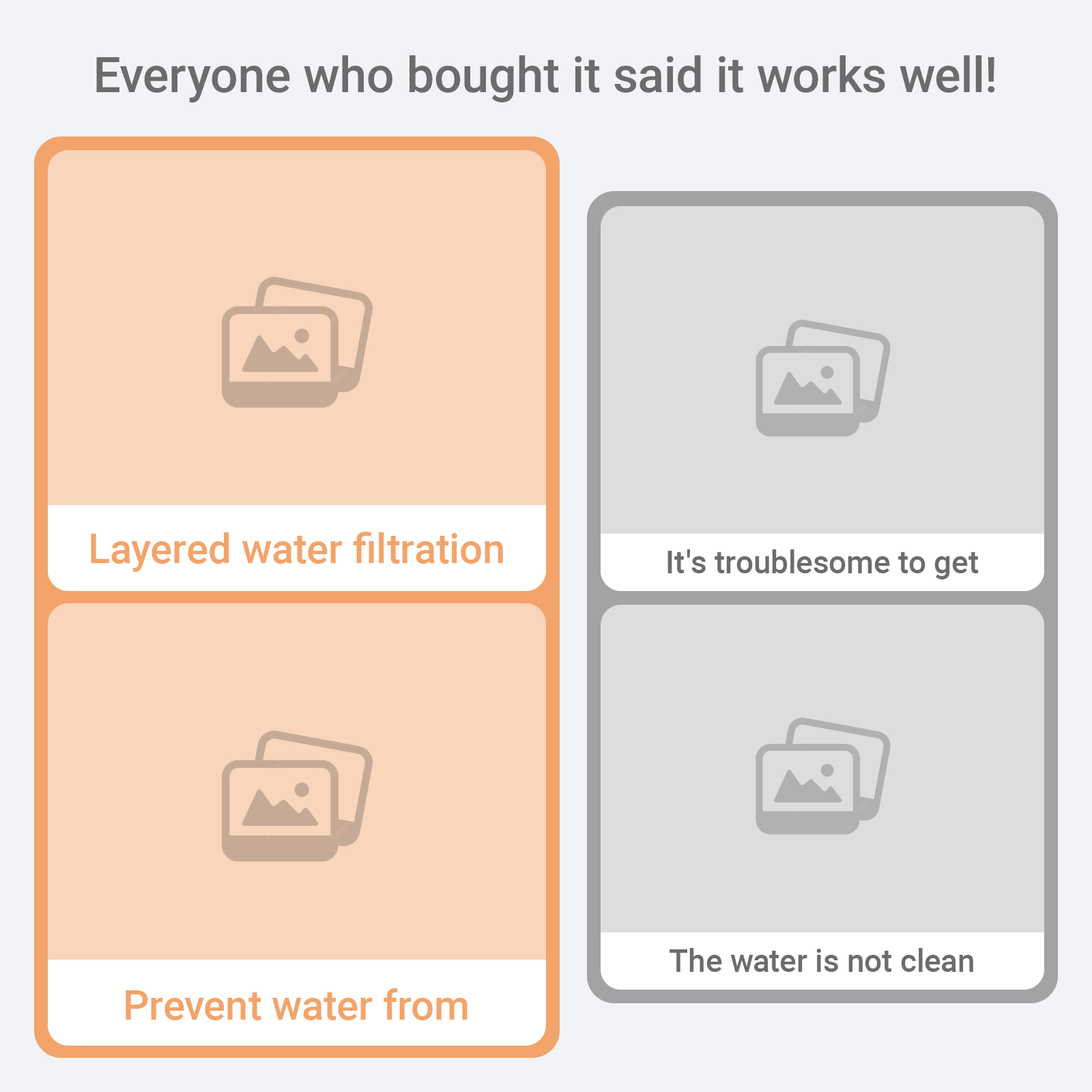
<style>
.page{position:relative;width:1092px;height:1092px;background:#f8d5bb}
.page>*{position:absolute;margin:0}
.t1{font:49.1px "Roboto-Medium";color:#6c6c6c}
.t2{font:40.9px "Roboto-Medium";color:#f2a46a}
.t3{font:31.3px "Roboto-Medium";color:#6c6c6c}
</style>
<div class="page">
<p class="t1" style="left:96px;top:55px;width:899px;height:48px">Everyone who bought it said it works well!</p>
<p class="t2" style="left:91px;top:532px;width:412px;height:40px">Layered water filtration</p>
<p class="t3" style="left:667px;top:549px;width:312px;height:30px">It's troublesome to get</p>
<p class="t3" style="left:670px;top:948px;width:303px;height:24px">The water is not clean</p>
<p class="t2" style="left:126px;top:988px;width:342px;height:32px">Prevent water from</p>
</div>
